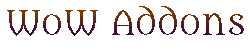
<style>
.page{position:relative;width:250px;height:50px;background:#ffffff}
.page>*{position:absolute;margin:0}
.t1{font:33.3px "Metamorphous"}
</style>
<div class="page">
<p class="t1" style="left:7px;top:6px;width:237px;height:30px">WoW Addons</p>
</div>
